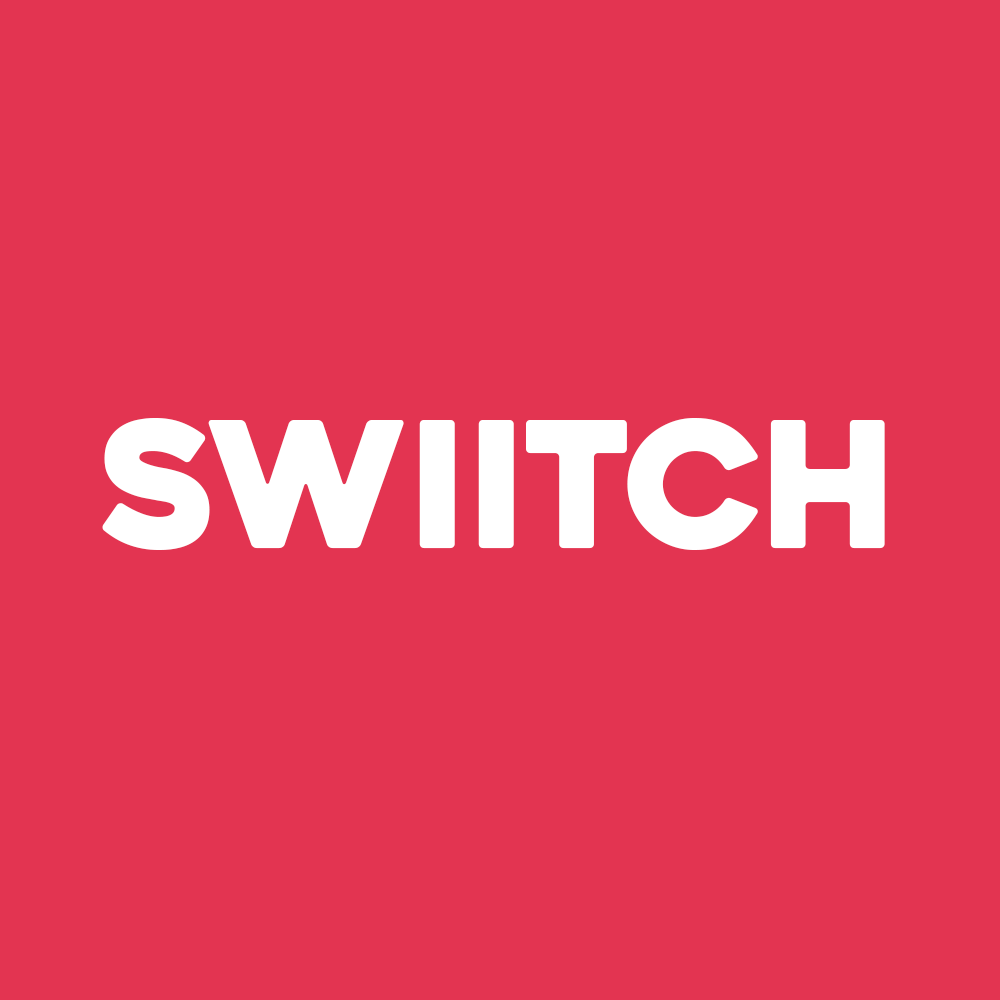
<style>
.page{position:relative;width:1000px;height:1000px;background:#e33451}
.page>*{position:absolute;margin:0}
.t1{font:175px "Heavitas";color:#ffffff}
</style>
<div class="page">
<p class="t1" style="left:102px;top:418px;width:783px;height:132px">SWIITCH</p>
</div>
